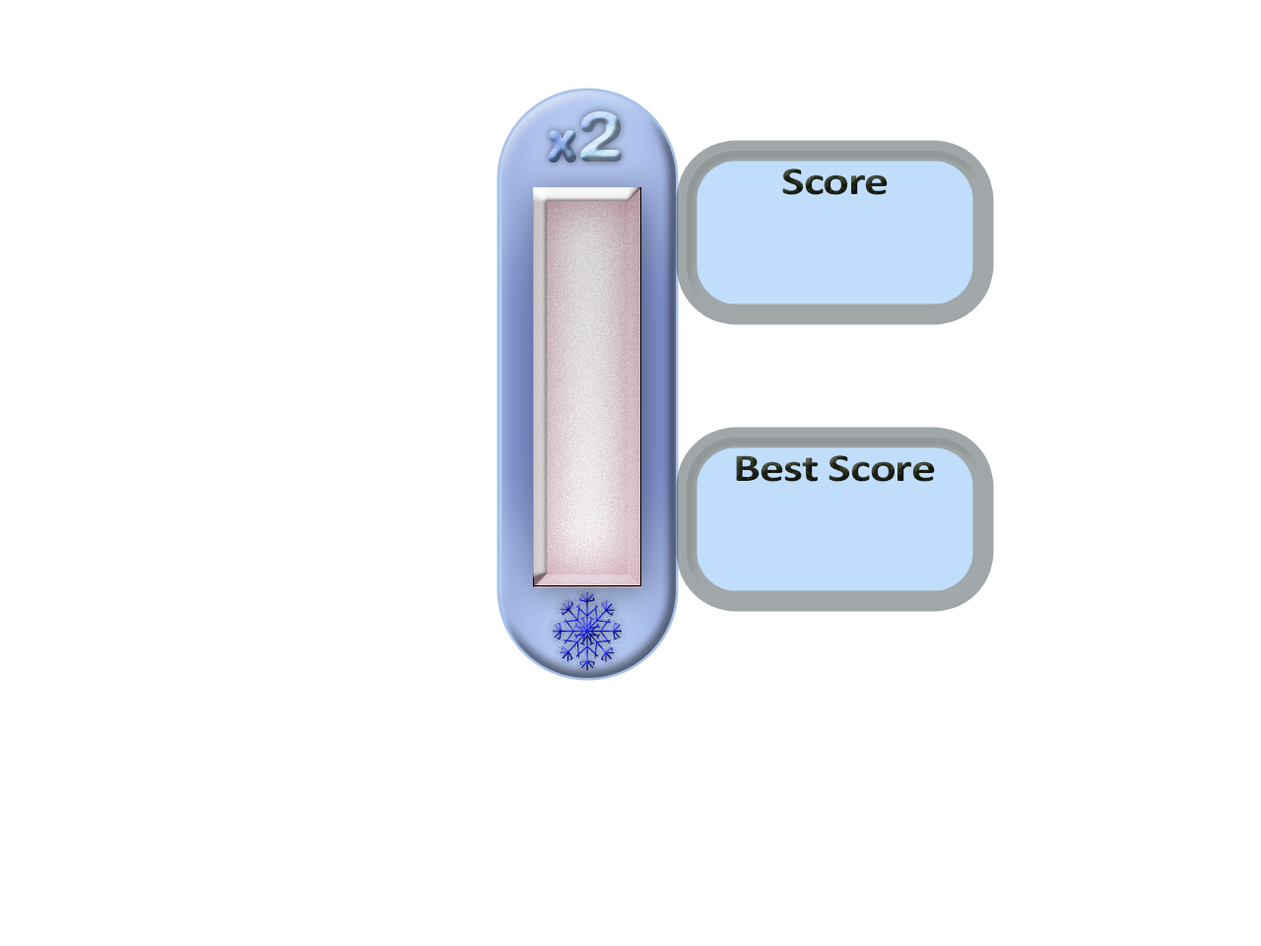
<style>
.page{position:relative;width:1261px;height:946px;background:#ffffff}
.page>*{position:absolute;margin:0}
.t1{font:39.4px "Calibri-Bold";letter-spacing:-0.02em;color:#222617;scale:1.25 1}
.t2{font:39.4px "Calibri-Bold";letter-spacing:-0.02em;color:#202515;scale:1.25 1}
</style>
<div class="page">
<p class="t1" style="left:782px;top:168px;width:106px;height:27px">Score</p>
<p class="t2" style="left:736px;top:455px;width:199px;height:27px">Best Score</p>
</div>
